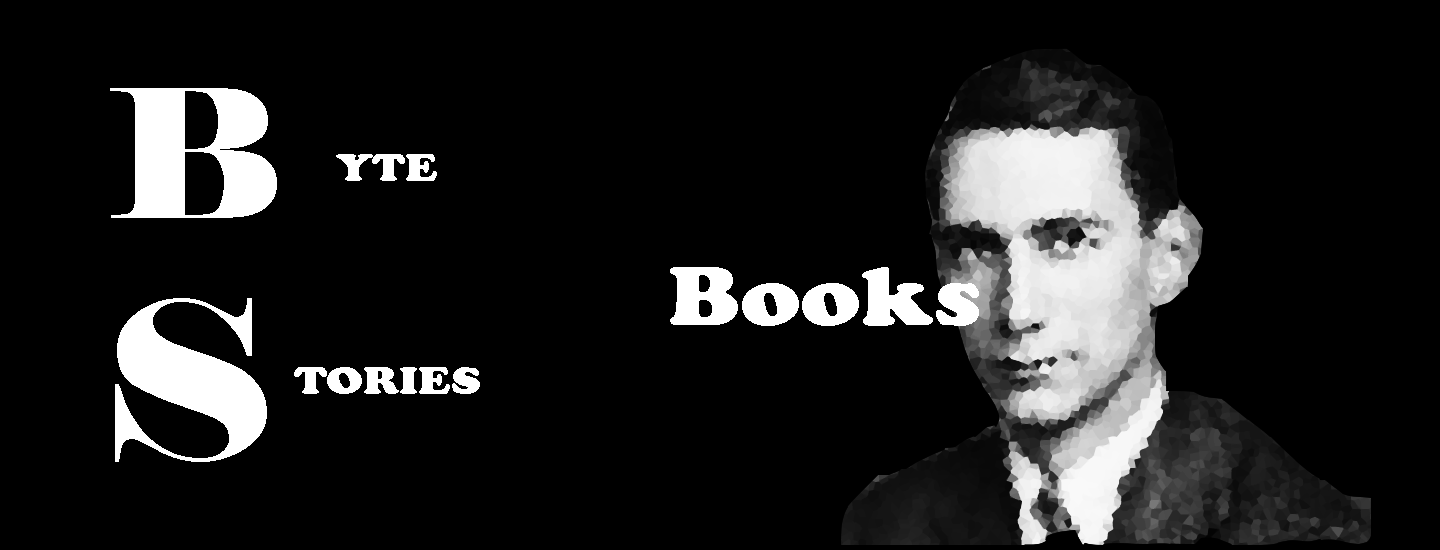
<style>
.page{position:relative;width:1440px;height:550px;background:#000000}
.page>*{position:absolute;margin:0}
.t1{font:177.5px "Elephant-Regular";color:#ffffff;scale:1.15 1}
.t2{font:40.8px "CooperBlack";color:#ffffff;scale:1.15 1}
.t3{font:87px "CooperBlack";color:#ffffff;scale:1.15 1}
.t4{font:218.8px "Elephant-Regular";color:#ffffff;scale:1.15 1}
</style>
<div class="page">
<p class="t1" style="left:110px;top:88px;width:167px;height:130px">B</p>
<p class="t2" style="left:336px;top:154px;width:101px;height:27px">YTE</p>
<p class="t3" style="left:670px;top:267px;width:309px;height:59px">Books</p>
<p class="t4" style="left:115px;top:298px;width:152px;height:164px">S</p>
<p class="t2" style="left:294px;top:367px;width:186px;height:27px">TORIES</p>
</div>
